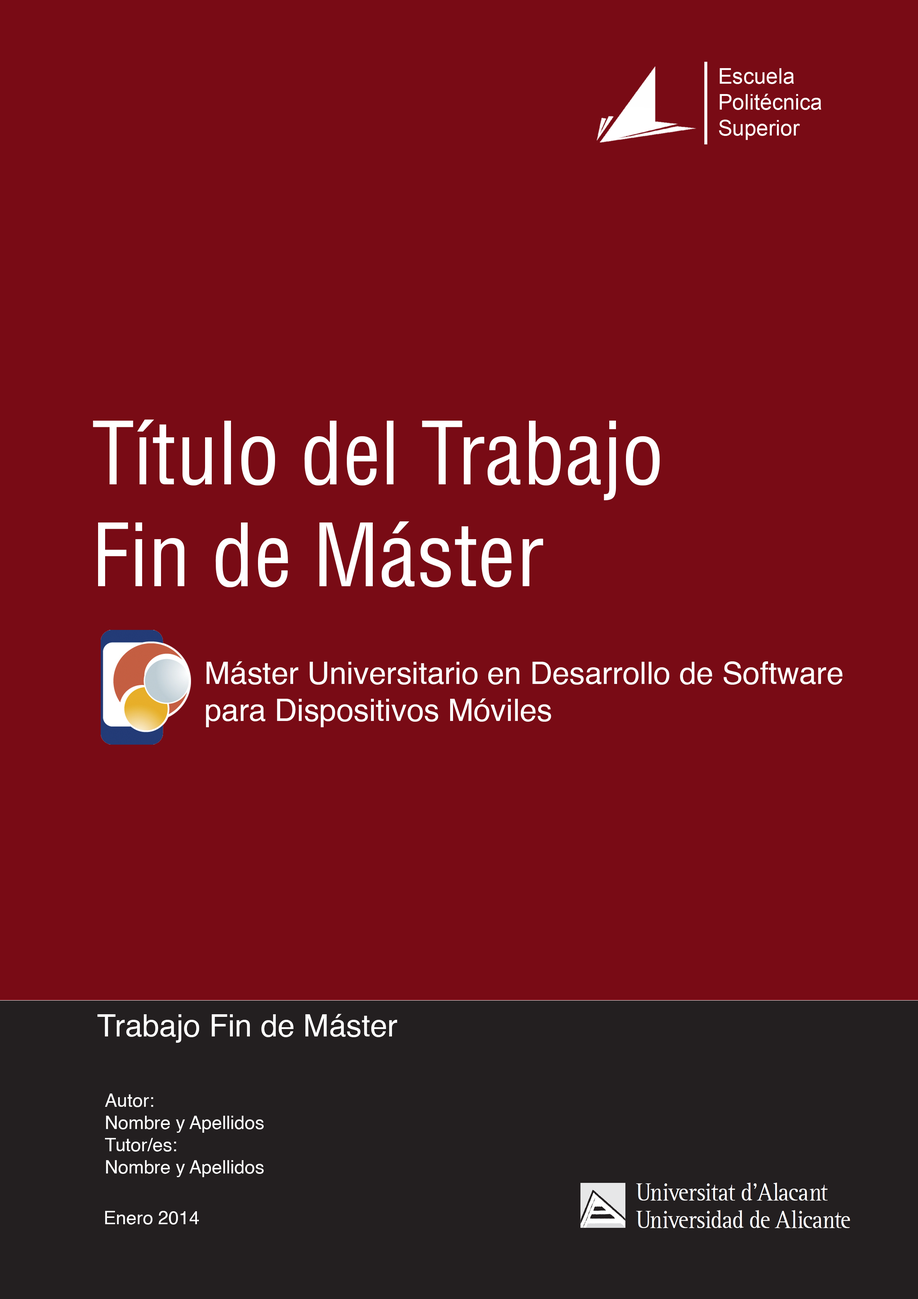
<style>
.page{position:relative;width:918px;height:1299px;background:#790b15}
.page>*{position:absolute;margin:0}
.t1{font:84.8px "HelveticaLTStd-Cond";color:#ffffff}
.t2{font:30.9px "Helvetica";color:#ffffff}
.t3{font:18.5px "Helvetica";color:#ffffff}
</style>
<div class="page">
<p class="t1" style="left:93px;top:419px;width:567px;height:168px">Título del Trabajo<br>Fin de Máster</p>
<p class="t2" style="left:206px;top:661px;width:637px;height:66px">Máster Universitario en Desarrollo de Software<br>para Dispositivos Móviles</p>
<p class="t2" style="left:97px;top:1014px;width:300px;height:29px">Trabajo Fin de Máster</p>
<p class="t3" style="left:105px;top:1093px;width:159px;height:84px">Autor:<br>Nombre y Apellidos<br>Tutor/es:<br>Nombre y Apellidos</p>
<p class="t3" style="left:105px;top:1211px;width:94px;height:13px">Enero 2014</p>
</div>
